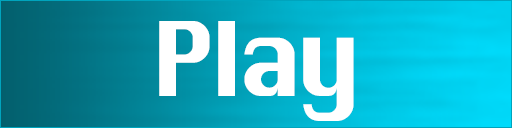
<style>
.page{position:relative;width:512px;height:128px}
.page>*{position:absolute;margin:0}
.t1{font:100px "Krungthep";letter-spacing:-0.075em;color:#ffffff}
</style>
<div class="page">
<p class="t1" style="left:159px;top:21px;width:195px;height:100px">Play</p>
</div>
